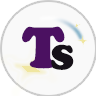
<style>
.page{position:relative;width:96px;height:96px;background:#f9f9f9}
.page>*{position:absolute;margin:0}
.t1{font:60px "CooperBlack";color:#4b1161}
.t2{font:36px "CooperBlack";color:#161118}
</style>
<div class="page">
<p class="t1" style="left:22px;top:26px;width:43px;height:43px">T</p>
<p class="t2" style="left:51px;top:44px;width:23px;height:26px">S</p>
</div>
